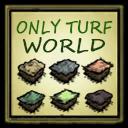
<style>
.page{position:relative;width:128px;height:128px}
.page>*{position:absolute;margin:0}
.t1{font:16.8px "SegoeScript";color:#21670c;font-variant:small-caps;font-weight:bold;scale:0.85 1}
.t2{font:16.6px "SegoeScript";color:#21670c;font-variant:small-caps;font-weight:bold;scale:0.9 1}
.t3{font:19.2px "SegoeScript";color:#19410d;font-variant:small-caps;font-weight:bold}
</style>
<div class="page">
<p class="t1" style="left:16px;top:19px;width:45px;height:16px">ONLY</p>
<p class="t2" style="left:65px;top:20px;width:48px;height:15px">TURF</p>
<p class="t3" style="left:23px;top:37px;width:83px;height:17px">WORLD</p>
</div>
